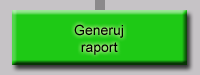
<style>
.page{position:relative;width:200px;height:75px;background:#1ec915}
.page>*{position:absolute;margin:0}
.t1{font:14px "ArialMT";color:#000000}
</style>
<div class="page">
<p class="t1" style="left:74px;top:24px;width:49px;height:31px;text-align:center">Generuj<br>raport</p>
</div>
